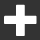
<style>
.page{position:relative;width:40px;height:40px;background:#333333}
.page>*{position:absolute;margin:0}
.t1{font:55px "BlackoakStd";color:#ffffff;font-weight:bold}
</style>
<div class="page">
<p class="t1" style="left:4px;top:4px;width:33px;height:32px">+</p>
</div>
